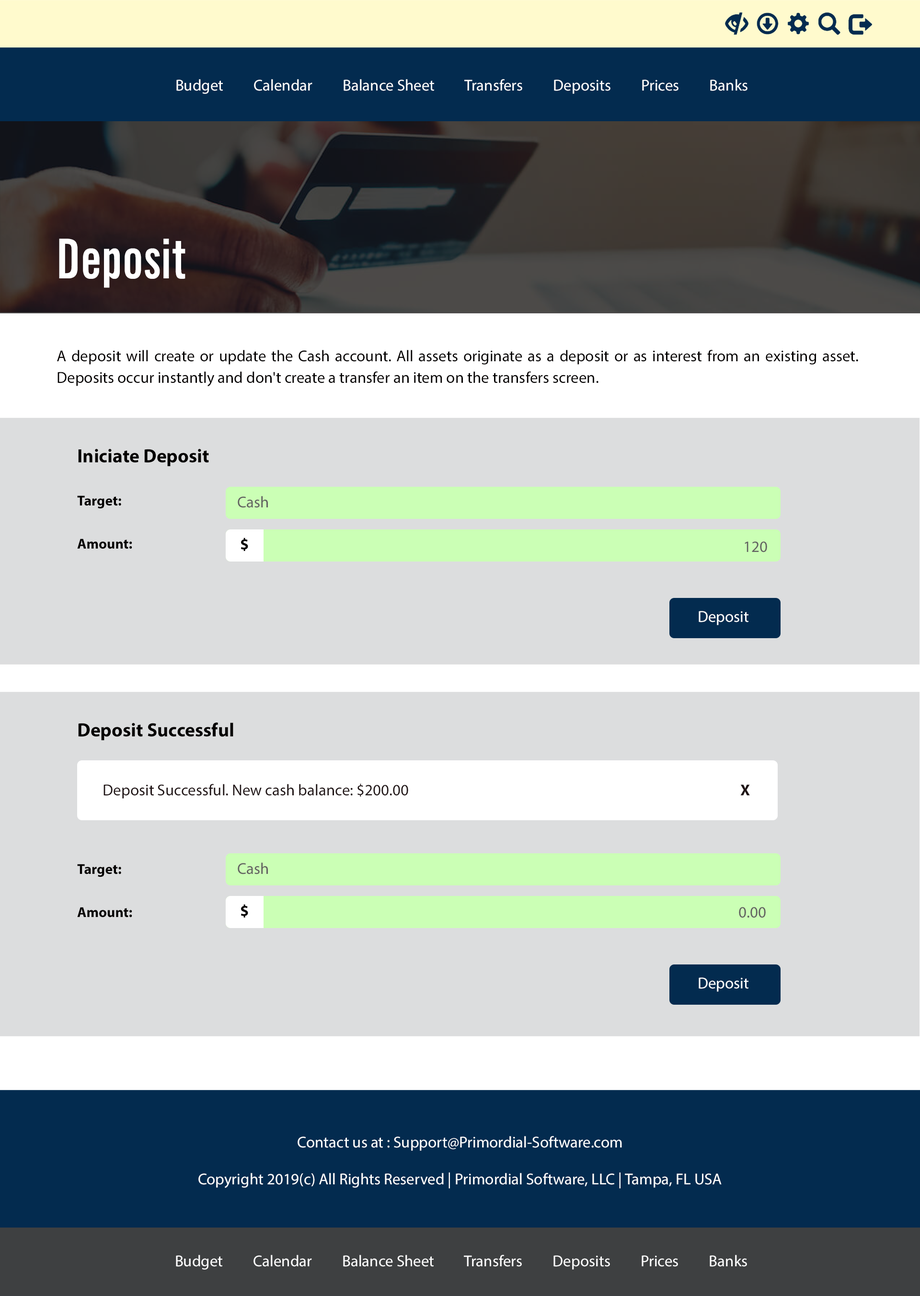
<style>
.page{position:relative;width:920px;height:1296px;background:#dcddde}
.page>*{position:absolute;margin:0}
.t1{font:15.8px "MyriadPro-Regular";color:#ffffff}
.t2{font:54.9px "NewsGothicBT-BoldExtraCondensed";color:#ffffff}
.t3{font:15.8px/21.6px "MyriadPro-Regular";color:#030000}
.t4{font:19.2px/21.6px "MyriadPro-Bold";color:#030000}
.t5{font:14.4px/21.6px "MyriadPro-Bold";color:#030000}
.t6{font:15.8px "MyriadPro-Regular";color:#626161}
.t7{font:15.8px "MyriadPro-Bold";color:#030000}
.t8{font:19.2px "MyriadPro-Bold";color:#030000}
.t9{font:15.8px "MyriadPro-Regular";color:#201516}
.t10{font:15.8px "MyriadPro-Bold";color:#201516;text-transform:uppercase}
</style>
<div class="page">
<p class="t1" style="left:176px;top:79px;width:571px;height:15px">Budget         Calendar         Balance Sheet         Transfers         Deposits         Prices         Banks</p>
<p class="t2" style="left:59px;top:239px;width:126px;height:49px">Deposit</p>
<p class="t3" style="left:57px;top:350px;width:801px;height:37px;text-align:justify">A deposit will create or update the Cash account. All assets originate as a deposit or as interest from an existing asset. Deposits occur instantly and don't create a transfer an item on the transfers screen.</p>
<p class="t4" style="left:77px;top:449px;width:132px;height:100px">Iniciate Deposit<br><br><span class="t5">Target:<br><br>Amount:</span></p>
<p class="t6" style="left:238px;top:496px;width:30px;height:12px">Cash</p>
<p class="t7" style="left:241px;top:538px;width:7px;height:13px">$</p>
<p class="t6" style="left:745px;top:541px;width:22px;height:11px">120</p>
<p class="t1" style="left:699px;top:611px;width:49px;height:14px">Deposit</p>
<p class="t8" style="left:78px;top:723px;width:155px;height:17px">Deposit Successful</p>
<p class="t9" style="left:103px;top:783px;width:647px;height:16px">Deposit Successful. New cash balance: $200.00                                                                                                   <span class="t10">X</span></p>
<p class="t5" style="left:77px;top:864px;width:55px;height:54px">Target:<br><br>Amount:</p>
<p class="t6" style="left:238px;top:862px;width:30px;height:12px">Cash</p>
<p class="t7" style="left:241px;top:904px;width:7px;height:14px">$</p>
<p class="t6" style="left:739px;top:907px;width:27px;height:11px">0.00</p>
<p class="t1" style="left:699px;top:977px;width:49px;height:15px">Deposit</p>
<p class="t1" style="left:298px;top:1136px;width:324px;height:15px">Contact us at : Support@Primordial-Software.com</p>
<p class="t1" style="left:198px;top:1173px;width:524px;height:16px">Copyright 2019(c) All Rights Reserved | Primordial Software, LLC | Tampa, FL USA</p>
<p class="t1" style="left:176px;top:1255px;width:571px;height:15px">Budget         Calendar         Balance Sheet         Transfers         Deposits         Prices         Banks</p>
</div>
